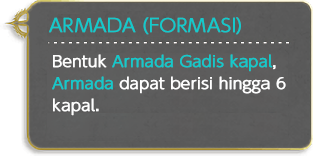
<style>
.page{position:relative;width:313px;height:156px}
.page>*{position:absolute;margin:0}
.t1{font:18px "UDShinGoPro-Light";color:#14c9cb;font-weight:bold}
.t2{font:15px/30px "UDShinGoPro-Light";color:#fefefe;font-weight:bold}
.t3{font:15px/30px "UDShinGoPro-Light";color:#14c9cb;font-weight:bold}
.t4{font:18px/30px "UDShinGoPro-Light";color:#fefefe;font-weight:bold}
</style>
<div class="page">
<p class="t1" style="left:49px;top:17px;width:192px;height:18px">ARMADA (FORMASI)</p>
<p class="t2" style="left:52px;top:54px;width:234px;height:62px">Bentuk <span class="t3">Armada Gadis kapal</span>,<br><span class="t3">Armada</span> dapat berisi hingga 6<br>kapal<span class="t4">.</span></p>
</div>
